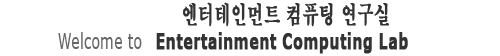
<style>
.page{position:relative;width:500px;height:56px;background:#ffffff}
.page>*{position:absolute;margin:0}
.t1{font:24px "H2mjrE";color:#333333;font-weight:bold;scale:0.67 1}
.t2{font:21.6px "Verdana";color:#666666;scale:0.67 1}
.t3{font:21.6px "Verdana-Bold";color:#333333;font-weight:bold;scale:0.67 1}
</style>
<div class="page">
<p class="t1" style="left:182px;top:2px;width:207px;height:25px">엔터테인먼트 컴퓨팅 연구실</p>
<p class="t2" style="left:58px;top:32px;width:84px;height:17px">Welcome to</p>
<p class="t3" style="left:156px;top:32px;width:252px;height:22px">Entertainment Computing Lab</p>
</div>
